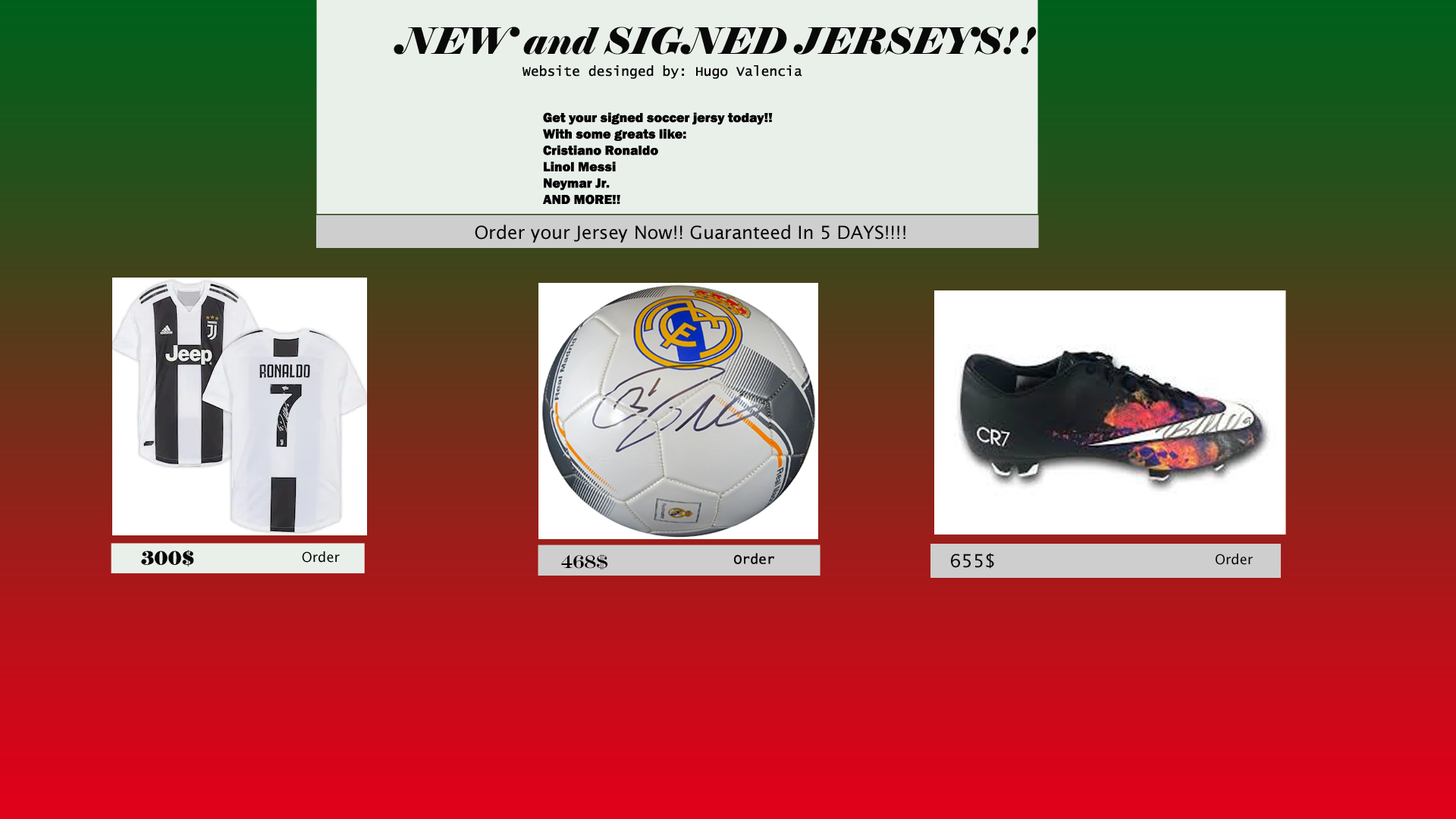
<style>
.page{position:relative;width:1456px;height:819px}
.page>*{position:absolute;margin:0}
.t1{font:36.4px "Elephant-Italic";color:#090909}
.t2{font:36.4px "Elephant-Italic";color:#000000}
.t3{font:13.6px "LucidaConsole";color:#060606}
.t4{font:13.6px "FranklinGothic-Heavy";color:#020202}
.t5{font:18.2px "LucidaSans";color:#050505}
.t6{font:18.2px "Elephant-Regular";color:#080808}
.t7{font:13.6px "LucidaSans";color:#070707}
.t8{font:18.2px "EngraversMT";color:#060606}
.t9{font:18.2px "LucidaSans";color:#080808}
.t10{font:13.6px "LucidaSans";color:#080808}
</style>
<div class="page">
<p class="t1" style="left:394px;top:27px;width:643px;height:28px"><span class="t2"> </span>NEW and SIGNED JERSEYS!!</p>
<p class="t3" style="left:522px;top:65px;width:280px;height:14px">Website desinged by: Hugo Valencia</p>
<p class="t4" style="left:543px;top:112px;width:230px;height:93px">Get your signed soccer jersy today!!<br>With some greats like:<br>Cristiano Ronaldo<br>Linol Messi<br>Neymar Jr.<br>AND MORE!!</p>
<p class="t5" style="left:475px;top:224px;width:430px;height:19px">Order your Jersey Now!! Guaranteed In 5 DAYS!!!!</p>
<p class="t6" style="left:141px;top:550px;width:53px;height:17px">300$</p>
<p class="t7" style="left:302px;top:551px;width:38px;height:12px">Order</p>
<p class="t8" style="left:561px;top:554px;width:46px;height:16px">468$</p>
<p class="t3" style="left:734px;top:553px;width:40px;height:11px">Order</p>
<p class="t9" style="left:951px;top:553px;width:43px;height:16px">655$</p>
<p class="t10" style="left:1216px;top:554px;width:37px;height:11px">Order</p>
</div>
